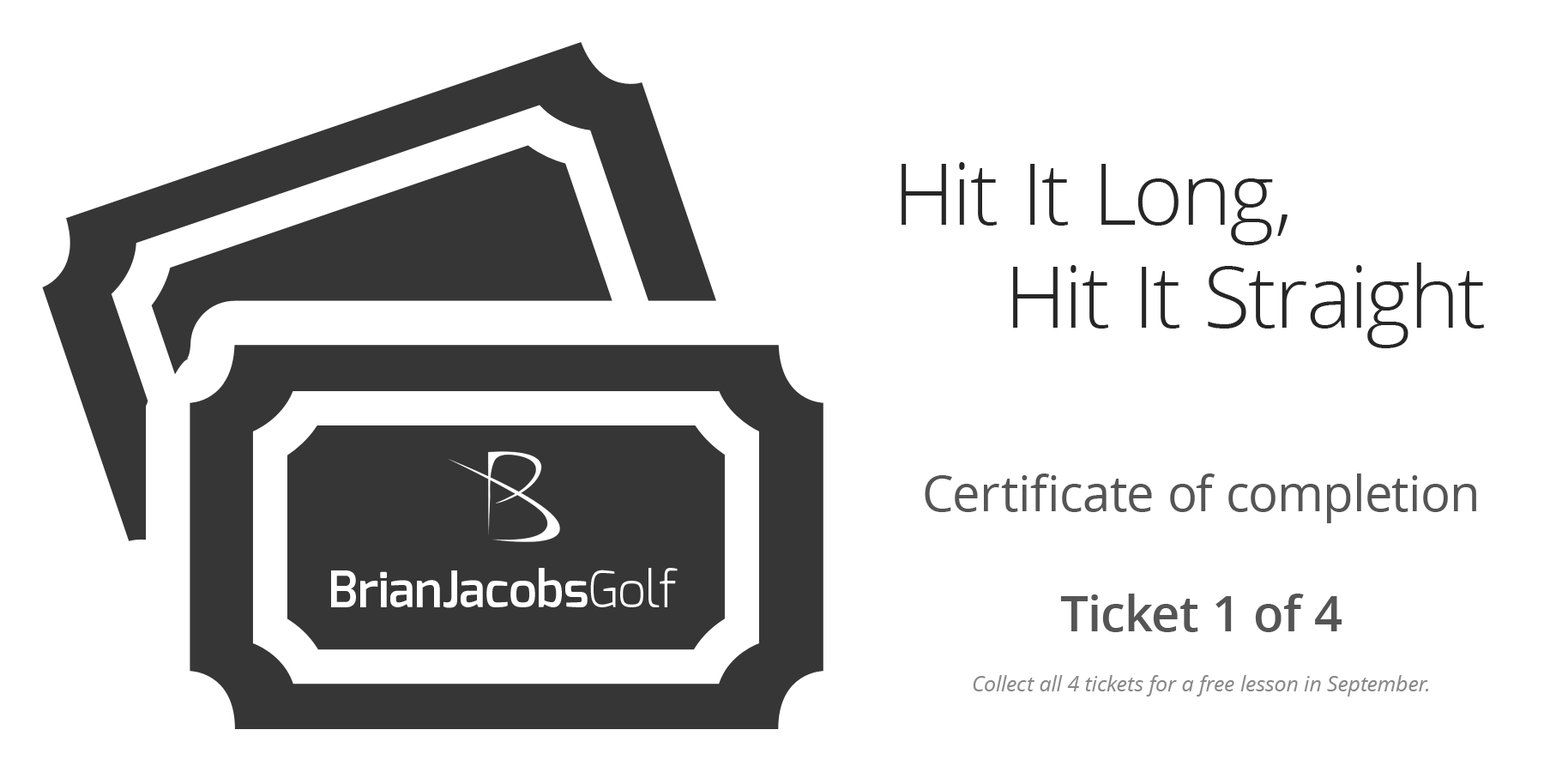
<style>
.page{position:relative;width:1544px;height:772px;background:#ffffff}
.page>*{position:absolute;margin:0}
.t1{font:85.8px "OpenSans-Light";color:#262626}
.t2{font:21.4px "OpenSans-Italic";color:#888888}
.t3{font:50px "OpenSans";color:#555555}
.t4{font:50px "OpenSans-Semibold";color:#555555}
.t5{font:50px "Exo-DemiBold";color:#ffffff}
.t6{font:50px "Exo-Light";color:#ffffff}
</style>
<div class="page">
<p class="t1" style="left:902px;top:162px;width:582px;height:186px">Hit It Long,<br>     Hit It Straight</p>
<p class="t2" style="left:925px;top:474px;width:552px;height:223px;text-align:center"><span class="t3">Certificate of completion<br><br></span><span class="t4">Ticket 1 of 4<br><br></span>Collect all 4 tickets for a free lesson in September.</p>
<p class="t5" style="left:331px;top:568px;width:347px;height:40px">BrianJacobs<span class="t6">Golf</span></p>
</div>
